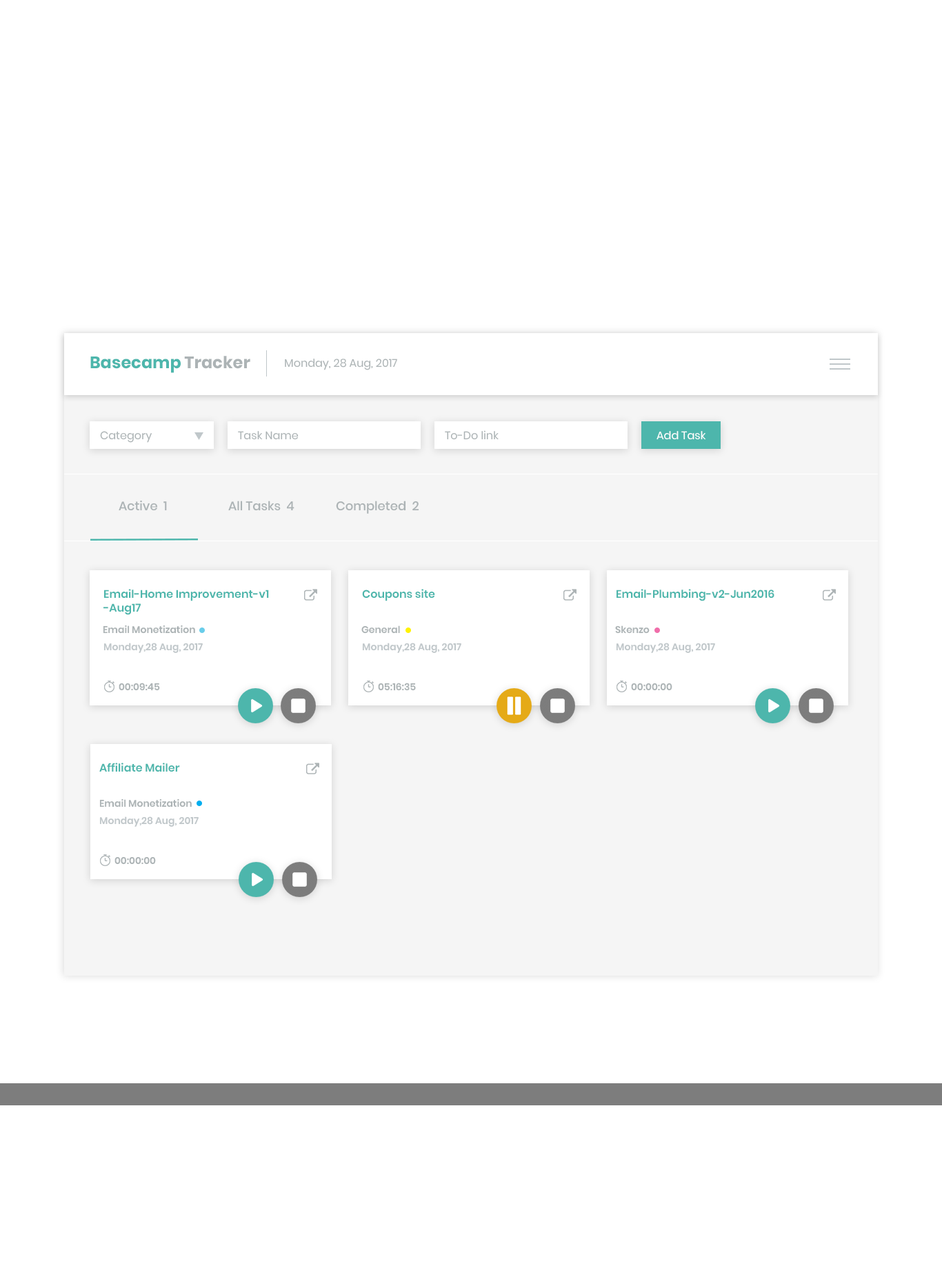
<style>
.page{position:relative;width:942px;height:1266px;background:#ffffff}
.page>*{position:absolute;margin:0}
.t1{font:16.5px "Poppins-Bold";color:#4db6ac}
.t2{font:16.5px "Poppins-Bold";color:#acb3b5}
.t3{font:11px "Poppins-Regular";color:#acb3b5}
.t4{font:11px "Poppins-Regular";color:#ffffff}
.t5{font:12.4px "Poppins-Medium";color:#acb3b5}
.t6{font:11px/13.8px "Poppins-SemiBold";color:#4db6ac}
.t7{font:11px "Poppins-SemiBold";color:#4db6ac}
.t8{font:9.7px "Poppins-SemiBold";color:#acb3b5}
.t9{font:9.7px "Poppins-SemiBold";color:#c0c7ca}
</style>
<div class="page">
<p class="t1" style="left:90px;top:356px;width:160px;height:17px">Basecamp<span class="t2"> Tracker</span></p>
<p class="t3" style="left:285px;top:359px;width:112px;height:11px">Monday, 28 Aug, 2017</p>
<p class="t3" style="left:100px;top:431px;width:52px;height:12px">Category</p>
<p class="t3" style="left:238px;top:431px;width:61px;height:9px">Task Name</p>
<p class="t3" style="left:445px;top:430px;width:54px;height:10px">To-Do link</p>
<p class="t4" style="left:656px;top:431px;width:50px;height:9px">Add Task</p>
<p class="t5" style="left:119px;top:500px;width:48px;height:11px">Active  1</p>
<p class="t5" style="left:228px;top:501px;width:66px;height:10px">All Tasks  4</p>
<p class="t5" style="left:336px;top:501px;width:83px;height:13px">Completed  2</p>
<p class="t6" style="left:103px;top:589px;width:166px;height:26px">Email-Home Improvement-v1<br>-Aug17</p>
<p class="t7" style="left:362px;top:589px;width:73px;height:12px">Coupons site</p>
<p class="t7" style="left:616px;top:589px;width:158px;height:12px">Email-Plumbing-v2-Jun2016</p>
<p class="t8" style="left:103px;top:625px;width:92px;height:9px">Email Monetization</p>
<p class="t8" style="left:361px;top:625px;width:39px;height:9px">General</p>
<p class="t8" style="left:615px;top:625px;width:35px;height:9px">Skenzo</p>
<p class="t9" style="left:103px;top:643px;width:100px;height:10px">Monday,28 Aug, 2017</p>
<p class="t9" style="left:362px;top:643px;width:99px;height:10px">Monday,28 Aug, 2017</p>
<p class="t9" style="left:616px;top:643px;width:99px;height:10px">Monday,28 Aug, 2017</p>
<p class="t8" style="left:119px;top:683px;width:41px;height:8px">00:09:45</p>
<p class="t8" style="left:378px;top:683px;width:38px;height:8px">05:16:35</p>
<p class="t8" style="left:631px;top:683px;width:41px;height:8px">00:00:00</p>
<p class="t7" style="left:99px;top:763px;width:81px;height:9px">Affiliate Mailer</p>
<p class="t8" style="left:99px;top:798px;width:93px;height:9px">Email Monetization</p>
<p class="t9" style="left:99px;top:816px;width:100px;height:11px">Monday,28 Aug, 2017</p>
<p class="t8" style="left:114px;top:856px;width:42px;height:9px">00:00:00</p>
</div>
